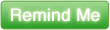
<style>
.page{position:relative;width:110px;height:30px}
.page>*{position:absolute;margin:0}
.t1{font:17px "Helvetica";color:#ffffff;font-weight:bold}
</style>
<div class="page">
<p class="t1" style="left:11px;top:8px;width:89px;height:14px">Remind Me</p>
</div>
